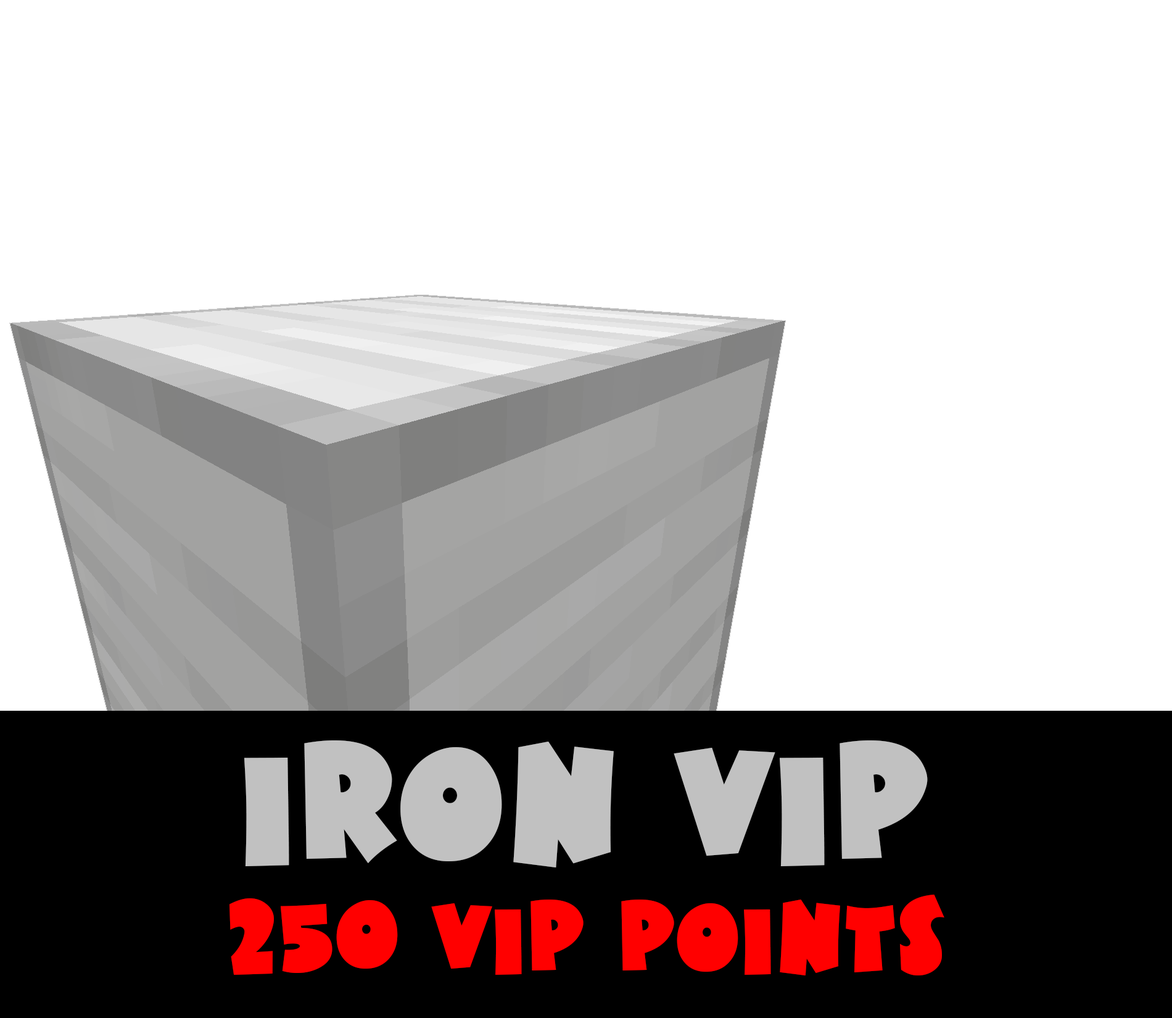
<style>
.page{position:relative;width:1172px;height:1018px;background:#ffffff}
.page>*{position:absolute;margin:0}
.t1{font:154.2px "HotMustardBTN";color:#c1c1c1}
.t2{font:92.5px "HotMustardBTN";color:#ff0000}
</style>
<div class="page">
<p class="t1" style="left:244px;top:740px;width:684px;height:127px">Iron VIP</p>
<p class="t2" style="left:229px;top:894px;width:715px;height:81px">250 VIP Points</p>
</div>
